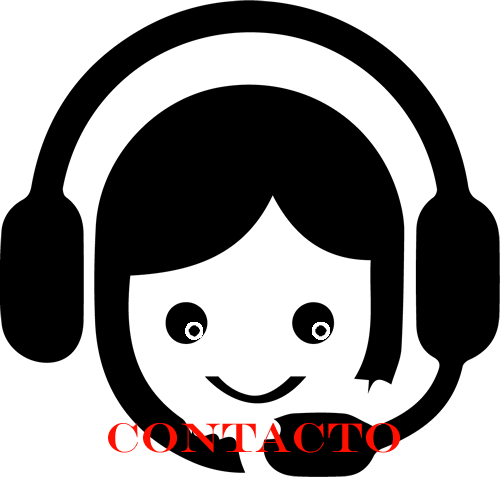
<style>
.page{position:relative;width:500px;height:477px;background:#ffffff}
.page>*{position:absolute;margin:0}
.t1{font:41.5px "EngraversMT";color:#ff0f00}
</style>
<div class="page">
<p class="t1" style="left:108px;top:423px;width:292px;height:30px">contacto</p>
</div>
